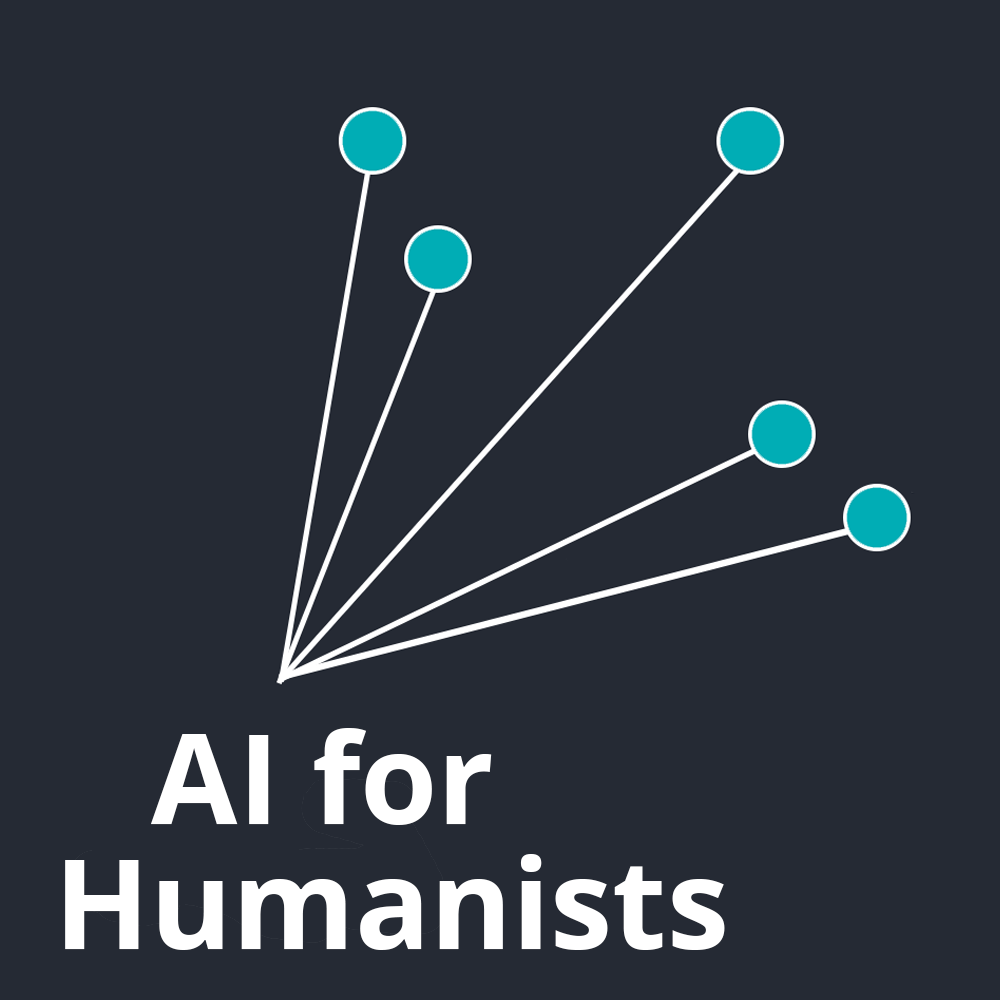
<style>
.page{position:relative;width:1000px;height:1000px;background:#252a34}
.page>*{position:absolute;margin:0}
.t1{font:125px/125px "OpenSans-Bold";color:#ffffff}
</style>
<div class="page">
<p class="t1" style="left:65px;top:728px;width:660px;height:222px">AI for Humanists</p>
</div>
